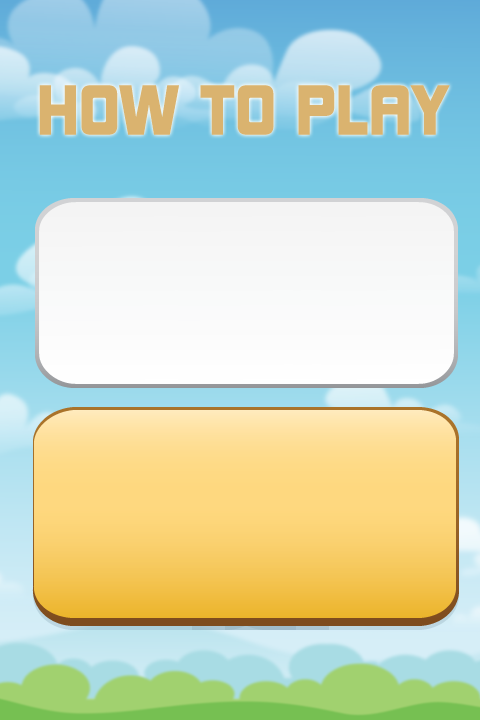
<style>
.page{position:relative;width:480px;height:720px}
.page>*{position:absolute;margin:0}
.t1{font:65px "KimberleyBl-Regular";color:#dab36f}
</style>
<div class="page">
<p class="t1" style="left:39px;top:85px;width:411px;height:50px">HOW TO PLAY</p>
</div>
